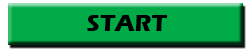
<style>
.page{position:relative;width:250px;height:50px;background:#00aa47}
.page>*{position:absolute;margin:0}
.t1{font:24px "ErasITC-Bold";color:#000000}
</style>
<div class="page">
<p class="t1" style="left:87px;top:15px;width:80px;height:16px">START</p>
</div>
